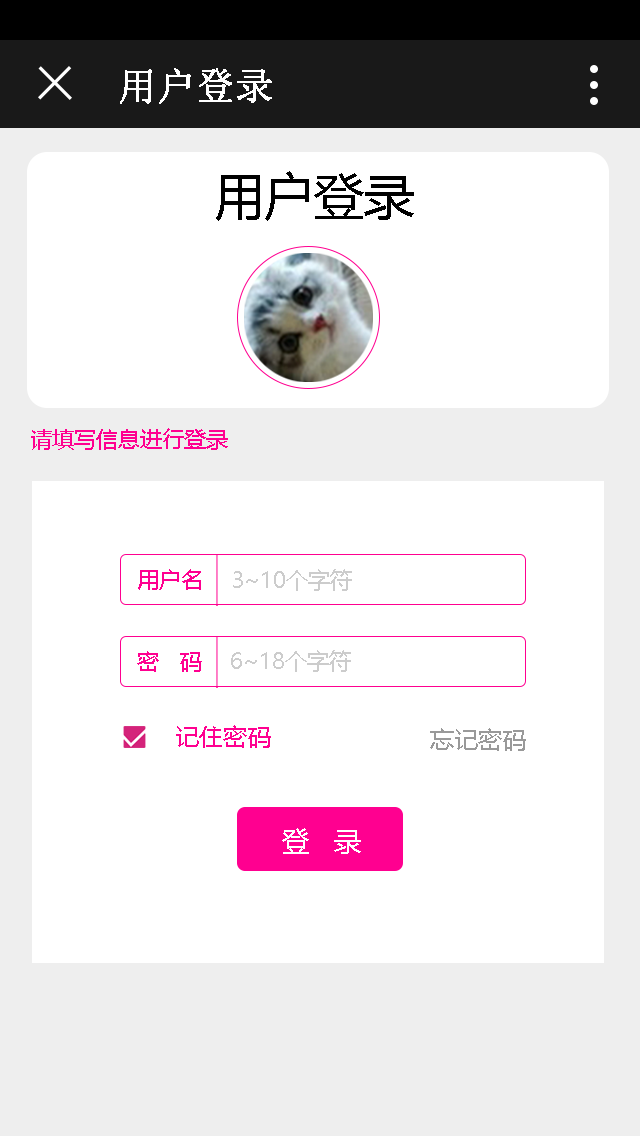
<style>
.page{position:relative;width:640px;height:1136px;background:#ffffff}
.page>*{position:absolute;margin:0}
.t1{font:38px "SimSun";color:#ffffff;font-weight:bold}
.t2{font:50px "MicrosoftYaHei";color:#000000}
.t3{font:22px "MicrosoftYaHei";color:#ff0090}
.t4{font:22px "MicrosoftYaHei";color:#cccccc}
.t5{font:24px "MicrosoftYaHei";color:#ff0090}
.t6{font:24px "MicrosoftYaHei";color:#999999}
.t7{font:28px "MicrosoftYaHei";color:#ffffff}
</style>
<div class="page">
<p class="t1" style="left:120px;top:68px;width:152px;height:36px">用户登录</p>
<p class="t2" style="left:216px;top:171px;width:198px;height:50px">用户登录</p>
<p class="t3" style="left:31px;top:428px;width:197px;height:22px">请填写信息进行登录</p>
<p class="t3" style="left:138px;top:569px;width:63px;height:21px">用户名</p>
<p class="t4" style="left:233px;top:569px;width:119px;height:22px">3~10个字符</p>
<p class="t3" style="left:137px;top:651px;width:65px;height:21px">密   码</p>
<p class="t4" style="left:231px;top:650px;width:120px;height:22px">6~18个字符</p>
<p class="t5" style="left:176px;top:725px;width:95px;height:23px">记住密码</p>
<p class="t6" style="left:430px;top:728px;width:96px;height:23px">忘记密码</p>
<p class="t7" style="left:282px;top:828px;width:79px;height:26px">登   录</p>
</div>
